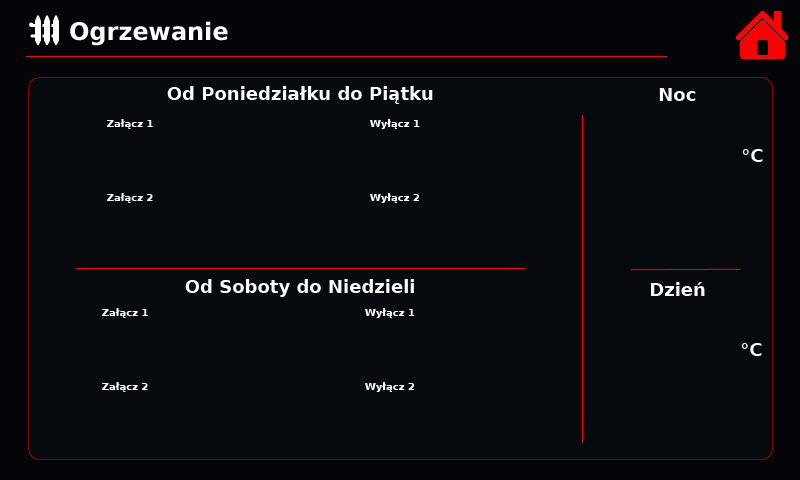
<style>
.page{position:relative;width:800px;height:480px;background:#06090d}
.page>*{position:absolute;margin:0}
.t1{font:24px "DejaVuSans-Bold";color:#ffffff}
.t2{font:18px "DejaVuSans-Bold";color:#ffffff}
.t3{font:10px "DejaVuSans-Bold";color:#ffffff}
</style>
<div class="page">
<p class="t1" style="left:70px;top:21px;width:158px;height:25px">Ogrzewanie</p>
<p class="t2" style="left:167px;top:86px;width:266px;height:18px">Od Poniedziałku do Piątku</p>
<p class="t2" style="left:659px;top:88px;width:37px;height:13px">Noc</p>
<p class="t3" style="left:107px;top:119px;width:46px;height:10px">Załącz 1</p>
<p class="t3" style="left:370px;top:119px;width:50px;height:10px">Wyłącz 1</p>
<p class="t2" style="left:742px;top:149px;width:21px;height:13px">°C</p>
<p class="t3" style="left:107px;top:193px;width:46px;height:10px">Załącz 2</p>
<p class="t3" style="left:370px;top:193px;width:49px;height:10px">Wyłącz 2</p>
<p class="t2" style="left:185px;top:279px;width:229px;height:18px">Od Soboty do Niedzieli</p>
<p class="t2" style="left:651px;top:282px;width:54px;height:14px">Dzień</p>
<p class="t3" style="left:102px;top:308px;width:46px;height:10px">Załącz 1</p>
<p class="t3" style="left:365px;top:308px;width:50px;height:10px">Wyłącz 1</p>
<p class="t2" style="left:741px;top:343px;width:21px;height:13px">°C</p>
<p class="t3" style="left:102px;top:382px;width:46px;height:10px">Załącz 2</p>
<p class="t3" style="left:365px;top:382px;width:49px;height:10px">Wyłącz 2</p>
</div>
